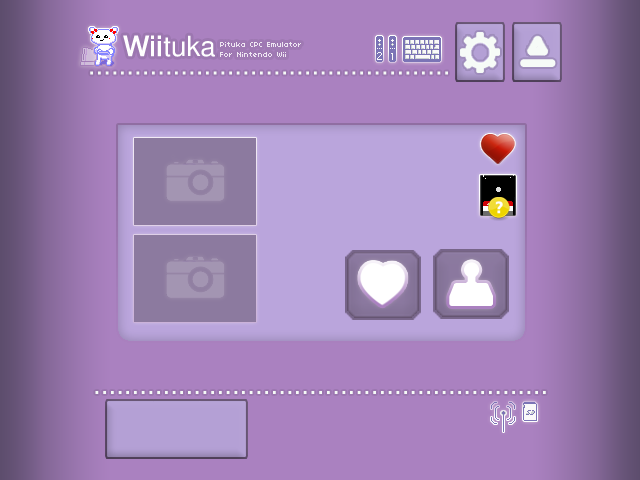
<style>
.page{position:relative;width:640px;height:480px;background:#aa81c0}
.page>*{position:absolute;margin:0}
.t1{font:27.8px "Japan";color:#ffffff}
.t2{font:27.8px "Japan";color:#ffffff;font-weight:bold}
.t3{font:8px "04b03";color:#eee6f2}
.t4{font:27.8px "Japan";color:#f6fbf7}
</style>
<div class="page">
<p class="t1" style="left:123px;top:35px;width:92px;height:22px"><span class="t2">Wii</span>tuka</p>
<p class="t3" style="left:220px;top:42px;width:81px;height:15px">Pituka CPC Emulator<br>For Nintendo Wii</p>
<p class="t4" style="left:90px;top:71px;width:358px;height:4px">...............................................</p>
<p class="t4" style="left:95px;top:391px;width:451px;height:3px">...........................................................</p>
</div>
